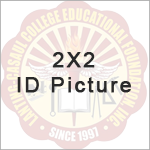
<style>
.page{position:relative;width:150px;height:150px;background:#ffffff}
.page>*{position:absolute;margin:0}
.t1{font:20.9px "ArialMT";letter-spacing:0.1em;color:#292929;font-weight:bold}
</style>
<div class="page">
<p class="t1" style="left:17px;top:52px;width:114px;height:41px;text-align:center">2X2<br>ID Picture</p>
</div>
